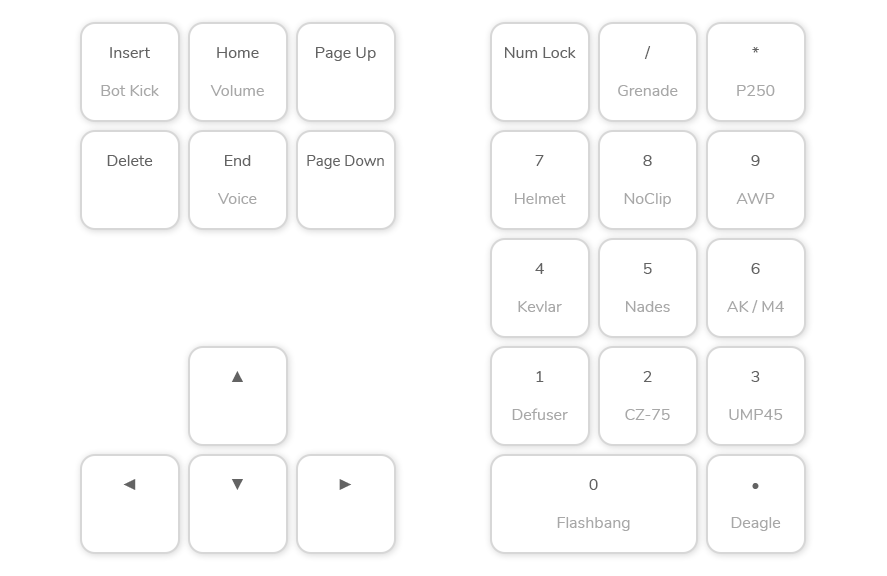
<style>
.page{position:relative;width:887px;height:576px;background:#ffffff}
.page>*{position:absolute;margin:0}
.t1{font:16px "Nunito-Regular";color:#a8a8a8}
.t2{font:16px "Nunito-Regular";color:#636363}
.t3{font:15px "Nunito-Regular";color:#636363}
.t4{font:16px "TimesNewRomanPSMT";color:#636363}
</style>
<div class="page">
<p class="t1" style="left:101px;top:47px;width:58px;height:49px;text-align:center"><span class="t2">Insert<br><br></span>Bot Kick</p>
<p class="t1" style="left:210px;top:47px;width:54px;height:49px;text-align:center"><span class="t2">Home<br><br></span>Volume</p>
<p class="t2" style="left:316px;top:47px;width:60px;height:14px">Page Up</p>
<p class="t2" style="left:505px;top:47px;width:71px;height:11px">Num Lock</p>
<p class="t1" style="left:618px;top:46px;width:60px;height:50px;text-align:center"><span class="t2">/<br><br></span>Grenade</p>
<p class="t1" style="left:737px;top:47px;width:38px;height:49px;text-align:center"><span class="t2">*<br><br></span>P250</p>
<p class="t2" style="left:107px;top:155px;width:46px;height:11px">Delete</p>
<p class="t1" style="left:218px;top:155px;width:39px;height:49px;text-align:center"><span class="t2">End<br><br></span>Voice</p>
<p class="t3" style="left:307px;top:155px;width:77px;height:14px">Page Down</p>
<p class="t1" style="left:515px;top:155px;width:51px;height:49px;text-align:center"><span class="t2">7<br><br></span>Helmet</p>
<p class="t1" style="left:624px;top:155px;width:47px;height:52px;text-align:center"><span class="t2">8<br><br></span>NoClip</p>
<p class="t1" style="left:736px;top:155px;width:39px;height:49px;text-align:center"><span class="t2">9<br><br></span>AWP</p>
<p class="t1" style="left:518px;top:263px;width:44px;height:49px;text-align:center"><span class="t2">4<br><br></span>Kevlar</p>
<p class="t1" style="left:626px;top:263px;width:44px;height:49px;text-align:center"><span class="t2">5<br><br></span>Nades</p>
<p class="t1" style="left:727px;top:263px;width:57px;height:50px;text-align:center"><span class="t2">6<br><br></span>AK / M4</p>
<p class="t4" style="left:231px;top:371px;width:12px;height:11px">▲</p>
<p class="t1" style="left:512px;top:371px;width:56px;height:49px;text-align:center"><span class="t2">1<br><br></span>Defuser</p>
<p class="t1" style="left:625px;top:371px;width:45px;height:49px;text-align:center"><span class="t2">2<br><br></span>CZ-75</p>
<p class="t1" style="left:729px;top:371px;width:54px;height:49px;text-align:center"><span class="t2">3<br><br></span>UMP45</p>
<p class="t4" style="left:123px;top:479px;width:13px;height:11px">◄</p>
<p class="t4" style="left:231px;top:479px;width:12px;height:11px">▼</p>
<p class="t4" style="left:339px;top:479px;width:13px;height:11px">►</p>
<p class="t1" style="left:557px;top:479px;width:73px;height:52px;text-align:center"><span class="t2">0<br><br></span>Flashbang</p>
<p class="t1" style="left:731px;top:483px;width:50px;height:48px;text-align:center"><span class="t2">•<br><br></span>Deagle</p>
</div>
